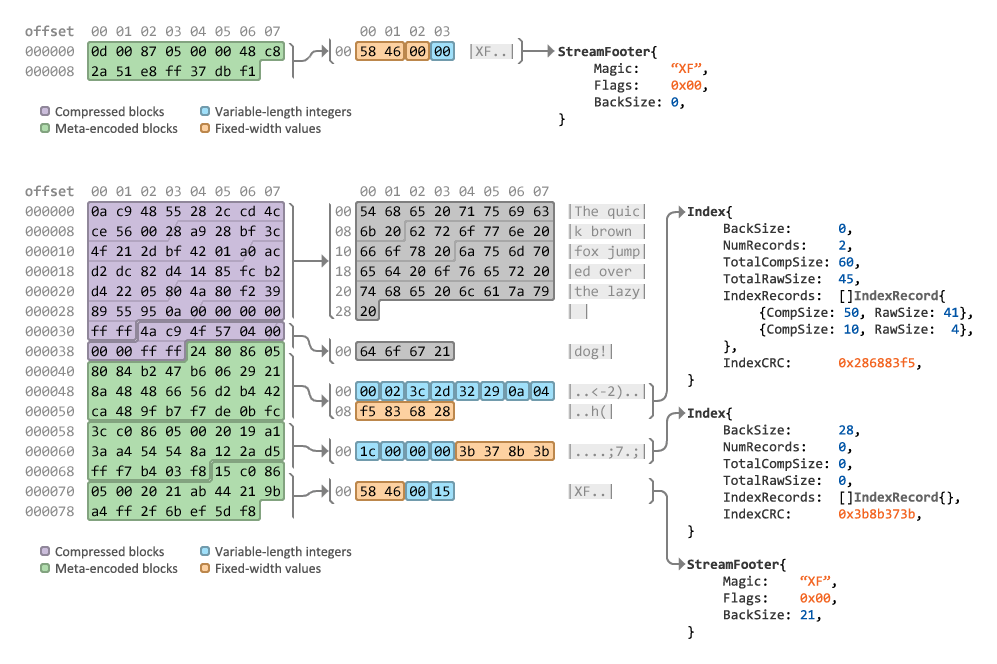
<style>
.page{position:relative;width:997px;height:664px;background:#ffffff}
.page>*{position:absolute;margin:0}
.t1{font:15px/20px "Consolas";color:#898989}
.t2{font:15px/20px "Consolas-Bold";color:#898989}
.t3{font:15px/20px "Consolas";color:#000000}
.t4{font:14px "Consolas-Bold";color:#363636}
.t5{font:14px "Consolas";color:#000000}
.t6{font:14px "Consolas";color:#363636}
.t7{font:14px "Consolas";color:#f26522}
.t8{font:14px "Consolas";color:#0054a6}
.t9{font:14px "Calibri";color:#555555}
.t10{font:14px "Consolas-Bold";color:#636363}
</style>
<div class="page">
<p class="t1" style="left:25px;top:25px;width:255px;height:52px"><span class="t2">offset</span>  00 01 02 03 04 05 06 07<br>000000  <span class="t3">0d 00 87 05 00 00 48 c8<br></span>000008  <span class="t3">2a 51 e8 ff 37 db f1</span></p>
<p class="t1" style="left:335px;top:26px;width:178px;height:33px"><span class="t2">   </span>00 01 02 03<br>00 <span class="t3">58 46 00 00  </span>|XF..|</p>
<p class="t4" style="left:558px;top:46px;width:149px;height:81px">StreamFooter<span class="t5">{<br> </span><span class="t6">Magic</span><span class="t5">:    </span><span class="t7">“XF”</span><span class="t5">,<br> </span><span class="t6">Flags</span><span class="t5">:    </span><span class="t7">0x00</span><span class="t5">,<br> </span><span class="t6">BackSize</span><span class="t5">: </span><span class="t8">0</span><span class="t5">,<br>}</span></p>
<p class="t9" style="left:55px;top:106px;width:123px;height:27px">Compressed blocks<br>Meta-encoded blocks</p>
<p class="t9" style="left:215px;top:106px;width:137px;height:27px">Variable-length integers<br>Fixed-width values</p>
<p class="t1" style="left:25px;top:185px;width:256px;height:332px"><span class="t2">offset</span>  00 01 02 03 04 05 06 07<br>000000  <span class="t3">0a c9 48 55 28 2c cd 4c<br></span>000008  <span class="t3">ce 56 00 28 a9 28 bf 3c<br></span>000010  <span class="t3">4f 21 2d bf 42 01 a0 ac<br></span>000018  <span class="t3">d2 dc 82 d4 14 85 fc b2<br></span>000020  <span class="t3">d4 22 05 80 4a 80 f2 39<br></span>000028  <span class="t3">89 55 95 0a 00 00 00 00<br></span>000030  <span class="t3">ff ff 4a c9 4f 57 04 00<br></span>000038  <span class="t3">00 00 ff ff 24 80 86 05<br></span>000040  <span class="t3">80 84 b2 47 b6 06 29 21<br></span>000048  <span class="t3">8a 48 48 66 56 d2 b4 42<br></span>000050  <span class="t3">ca 48 9f b7 f7 de 0b fc<br></span>000058  <span class="t3">3c c0 86 05 00 20 19 a1<br></span>000060  <span class="t3">3a a4 54 54 8a 12 2a d5<br></span>000068  <span class="t3">ff f7 b4 03 f8 15 c0 86<br></span>000070  <span class="t3">05 00 20 21 ab 44 21 9b<br></span>000078  <span class="t3">a4 ff 2f 6b ef 5d f8</span></p>
<p class="t1" style="left:335px;top:186px;width:310px;height:313px">00 01 02 03 04 05 06 07<br>00 <span class="t3">54 68 65 20 71 75 69 63</span>  |The quic|<br>08 <span class="t3">6b 20 62 72 6f 77 6e 20</span>  |k brown |<br>10 <span class="t3">66 6f 78 20 6a 75 6d 70</span>  |fox jump|<br>18 <span class="t3">65 64 20 6f 76 65 72 20</span>  |ed over |<br>20 <span class="t3">74 68 65 20 6c 61 7a 79</span>  |the lazy|<br>28 <span class="t3">20                       </span>| |<br><br>00 <span class="t3">64 6f 67 21</span>              |dog!|<br><br>00 <span class="t3">00 02 3c 2d 32 29 0a 04  </span>|..&lt;-2)..|<br>08 <span class="t3">f5 83 68 28              </span>|..h(|<br><br>00 <span class="t3">1c 00 00 00 3b 37 8b 3b  </span>|....;7.;|  <br><br>00 <span class="t3">58 46 00 15              </span>|XF..|</p>
<p class="t6" style="left:687px;top:206px;width:285px;height:433px"><span class="t4">Index</span><span class="t5">{<br> </span>BackSize<span class="t5">:      </span><span class="t8">0</span><span class="t5">,<br> </span>NumRecords<span class="t5">:    </span><span class="t8">2</span><span class="t5">,<br> </span>TotalCompSize<span class="t5">: </span><span class="t8">60</span><span class="t5">,<br> </span>TotalRawSize<span class="t5">:  </span><span class="t8">45</span><span class="t5">,<br> </span>IndexRecords<span class="t5">:  []</span><span class="t10">IndexRecord</span><span class="t5">{<br>  {</span>CompSize<span class="t5">: </span><span class="t8">50</span><span class="t5">, </span>RawSize<span class="t5">: </span><span class="t8">41</span><span class="t5">},<br>  {</span>CompSize<span class="t5">: </span><span class="t8">10</span><span class="t5">, </span>RawSize<span class="t5">:  </span><span class="t8">4</span><span class="t5">},<br> },<br> </span>IndexCRC<span class="t5">:      </span><span class="t7">0x286883f5</span><span class="t5">,<br>}<br><br></span><span class="t4">Index</span><span class="t5">{<br> </span>BackSize<span class="t5">:      </span><span class="t8">28</span><span class="t5">,<br> </span>NumRecords<span class="t5">:    </span><span class="t8">0</span><span class="t5">,<br> </span>TotalCompSize<span class="t5">: </span><span class="t8">0</span><span class="t5">,<br> </span>TotalRawSize<span class="t5">:  </span><span class="t8">0</span><span class="t5">,<br> </span>IndexRecords<span class="t5">:  []</span><span class="t10">IndexRecord</span><span class="t5">{},<br></span> IndexCRC<span class="t5">:      </span><span class="t7">0x3b8b373b</span><span class="t5">,<br>}<br><br></span><span class="t4">StreamFooter</span><span class="t5">{<br> </span>Magic<span class="t5">:    </span><span class="t7">“XF”</span><span class="t5">,<br> </span>Flags<span class="t5">:    </span><span class="t7">0x00</span><span class="t5">,<br> </span>BackSize<span class="t5">: </span><span class="t8">21</span><span class="t5">,<br>}</span></p>
<p class="t9" style="left:55px;top:546px;width:123px;height:27px">Compressed blocks<br>Meta-encoded blocks</p>
<p class="t9" style="left:215px;top:546px;width:137px;height:27px">Variable-length integers<br>Fixed-width values</p>
</div>
